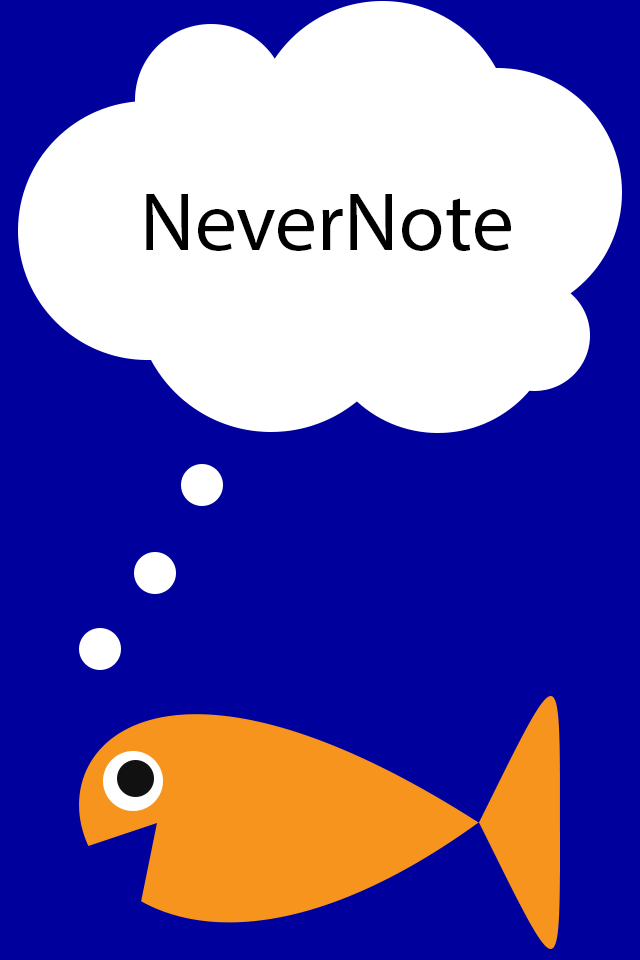
<style>
.page{position:relative;width:640px;height:960px;background:#00009d}
.page>*{position:absolute;margin:0}
.t1{font:83.1px "MyriadPro-Regular";color:#000000}
</style>
<div class="page">
<p class="t1" style="left:146px;top:194px;width:365px;height:57px">NeverNote</p>
</div>
